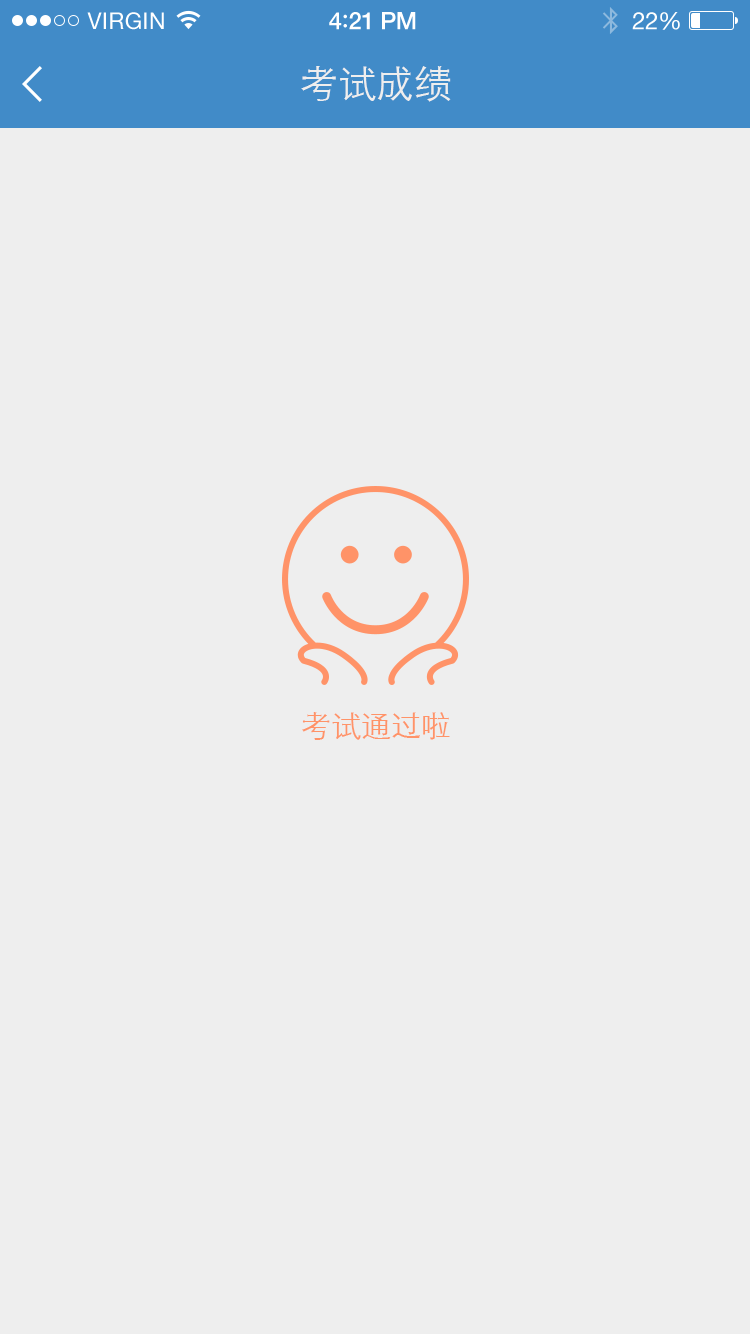
<style>
.page{position:relative;width:750px;height:1334px;background:#eeeeee}
.page>*{position:absolute;margin:0}
.t1{font:23px "HelveticaNeue";letter-spacing:0.02em;color:#ffffff}
.t2{font:24px "HelveticaNeue-Medium";letter-spacing:-0.02em;color:#ffffff}
.t3{font:26px "Avenir-Medium";letter-spacing:-0.02em;color:#ffffff}
.t4{font:24px "HelveticaNeue";letter-spacing:-0.02em;color:#ffffff}
.t5{font:38px "STXihei";color:#eeeeee}
.t6{font:30px "STXihei";color:#ff9368}
</style>
<div class="page">
<p class="t1" style="left:87px;top:12px;width:77px;height:18px">VIRGIN</p>
<p class="t2" style="left:329px;top:12px;width:87px;height:18px">4<span class="t3">:</span>21 PM</p>
<p class="t4" style="left:632px;top:12px;width:48px;height:18px">22%</p>
<p class="t5" style="left:301px;top:66px;width:150px;height:36px">考试成绩</p>
<p class="t6" style="left:302px;top:712px;width:148px;height:28px">考试通过啦</p>
</div>
